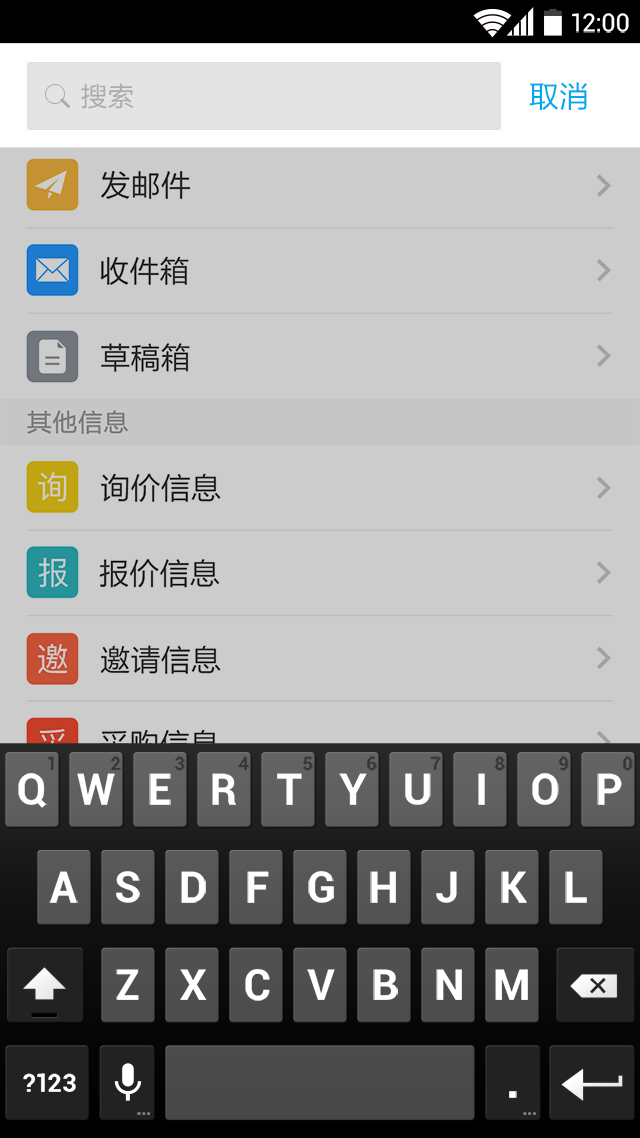
<style>
.page{position:relative;width:640px;height:1138px;background:#cccccc}
.page>*{position:absolute;margin:0}
.t1{font:24.9px "Roboto-Regular";color:#ffffff}
.t2{font:26.7px "FZLTHJW--GB1-0";color:#ababab}
.t3{font:30.2px "FZLTHJW--GB1-0";color:#00aaee}
.t4{font:17.8px "Roboto-Bold";color:#282828}
.t5{font:42.7px "Roboto-Bold";color:#ffffff}
.t6{font:24.9px "Roboto-Bold";color:#ffffff}
.t7{font:17.8px "Roboto-Bold";letter-spacing:-0.025em;color:#848484}
</style>
<div class="page">
<p class="t1" style="left:572px;top:13px;width:57px;height:20px">12:00</p>
<p class="t2" style="left:81px;top:83px;width:53px;height:26px">搜索</p>
<p class="t3" style="left:529px;top:82px;width:58px;height:28px">取消</p>
<p class="t4" style="left:48px;top:756px;width:6px;height:14px;opacity:0.8">1</p>
<p class="t4" style="left:110px;top:756px;width:11px;height:14px;opacity:0.8">2</p>
<p class="t4" style="left:174px;top:756px;width:11px;height:15px;opacity:0.8">3</p>
<p class="t4" style="left:238px;top:756px;width:11px;height:14px;opacity:0.8">4</p>
<p class="t4" style="left:303px;top:756px;width:10px;height:15px;opacity:0.8">5</p>
<p class="t4" style="left:367px;top:756px;width:10px;height:15px;opacity:0.8">6</p>
<p class="t4" style="left:430px;top:756px;width:11px;height:14px;opacity:0.8">7</p>
<p class="t4" style="left:494px;top:756px;width:11px;height:15px;opacity:0.8">8</p>
<p class="t4" style="left:558px;top:756px;width:11px;height:15px;opacity:0.8">9</p>
<p class="t4" style="left:623px;top:756px;width:10px;height:15px;opacity:0.8">0</p>
<p class="t5" style="left:18px;top:773px;width:29px;height:35px">Q</p>
<p class="t5" style="left:77px;top:773px;width:38px;height:32px">W</p>
<p class="t5" style="left:149px;top:773px;width:22px;height:32px">E</p>
<p class="t5" style="left:212px;top:773px;width:24px;height:32px">R</p>
<p class="t5" style="left:277px;top:773px;width:25px;height:32px">T</p>
<p class="t5" style="left:339px;top:773px;width:28px;height:32px">Y</p>
<p class="t5" style="left:405px;top:773px;width:26px;height:32px">U</p>
<p class="t5" style="left:478px;top:773px;width:7px;height:32px">I</p>
<p class="t5" style="left:532px;top:773px;width:27px;height:32px">O</p>
<p class="t5" style="left:597px;top:773px;width:25px;height:32px">P</p>
<p class="t5" style="left:49px;top:871px;width:29px;height:32px">A</p>
<p class="t5" style="left:116px;top:871px;width:24px;height:32px">S</p>
<p class="t5" style="left:181px;top:871px;width:25px;height:32px">D</p>
<p class="t5" style="left:247px;top:871px;width:22px;height:32px">F</p>
<p class="t5" style="left:308px;top:871px;width:26px;height:32px">G</p>
<p class="t5" style="left:370px;top:871px;width:26px;height:32px">H</p>
<p class="t5" style="left:436px;top:871px;width:21px;height:32px">J</p>
<p class="t5" style="left:501px;top:871px;width:26px;height:32px">K</p>
<p class="t5" style="left:565px;top:871px;width:22px;height:32px">L</p>
<p class="t5" style="left:116px;top:969px;width:23px;height:31px">Z</p>
<p class="t5" style="left:180px;top:969px;width:27px;height:31px">X</p>
<p class="t5" style="left:245px;top:969px;width:25px;height:32px">C</p>
<p class="t5" style="left:307px;top:969px;width:28px;height:31px">V</p>
<p class="t5" style="left:373px;top:969px;width:25px;height:31px">B</p>
<p class="t5" style="left:436px;top:969px;width:26px;height:31px">N</p>
<p class="t5" style="left:495px;top:969px;width:33px;height:31px">M</p>
<p class="t6" style="left:23px;top:1073px;width:53px;height:19px">?123</p>
<p class="t5" style="left:509px;top:1091px;width:8px;height:7px">.</p>
<p class="t7" style="left:137px;top:1112px;width:13px;height:3px">...</p>
<p class="t7" style="left:523px;top:1112px;width:13px;height:3px">...</p>
</div>
